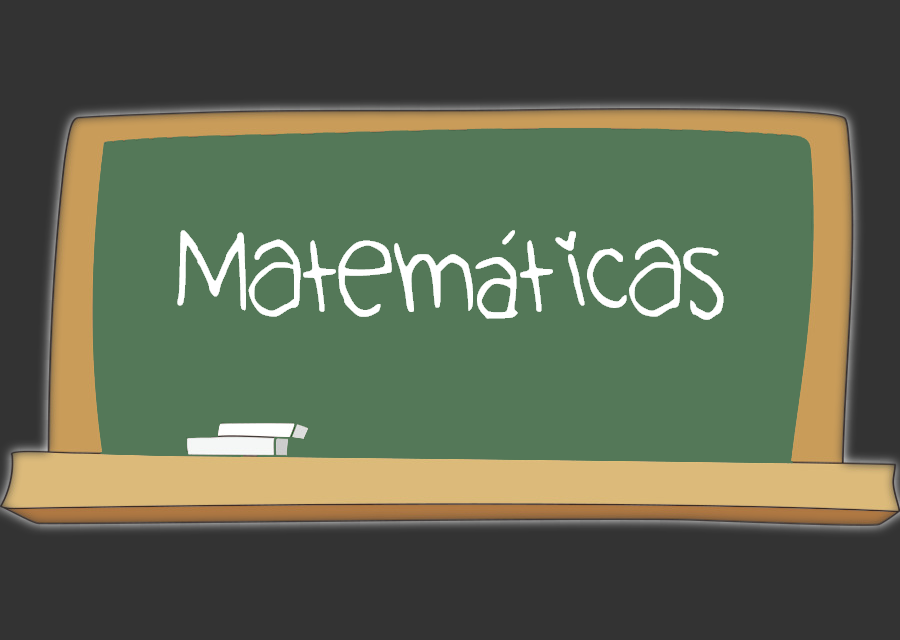
<style>
.page{position:relative;width:900px;height:640px;background:#547858}
.page>*{position:absolute;margin:0}
.t1{font:144px "Cute_Font";color:#ffffff}
</style>
<div class="page">
<p class="t1" style="left:177px;top:230px;width:547px;height:90px">Matemáticas</p>
</div>
